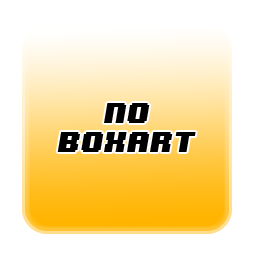
<style>
.page{position:relative;width:255px;height:255px;background:#ffffff}
.page>*{position:absolute;margin:0}
.t1{font:24px "8BITWONDERNominal";color:#000000;font-style:italic;scale:0.96 1}
</style>
<div class="page">
<p class="t1" style="left:57px;top:103px;width:139px;height:49px;text-align:center">No<br>boxart</p>
</div>
